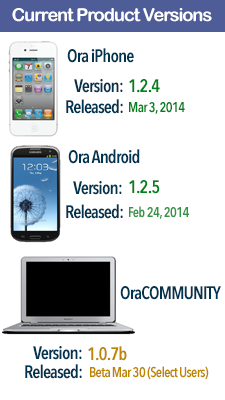
<style>
.page{position:relative;width:225px;height:400px;background:#ffffff}
.page>*{position:absolute;margin:0}
.t1{font:18px "ArialRoundedMTBold";letter-spacing:-0.05em;color:#ffffff}
.t2{font:18px "AvenirNextCondensed-DemiBold";letter-spacing:-0.05em;color:#003450}
.t3{font:18px "AvenirNextCondensed-DemiBold";letter-spacing:-0.05em;color:#00811b}
.t4{font:14px "AvenirNextCondensed-DemiBold";letter-spacing:-0.05em;color:#00811b}
.t5{font:14px "AvenirNextCondensed-DemiBold";letter-spacing:-0.05em;color:#349346}
.t6{font:18px "AvenirNextCondensed-DemiBold";letter-spacing:-0.05em;color:#bd8601}
.t7{font:14px "AvenirNextCondensed-DemiBold";letter-spacing:-0.05em;color:#bd8601}
</style>
<div class="page">
<p class="t1" style="left:12px;top:8px;width:200px;height:14px">Current Product Versions</p>
<p class="t2" style="left:67px;top:48px;width:67px;height:15px">Ora iPhone</p>
<p class="t2" style="left:74px;top:79px;width:49px;height:14px">Version:</p>
<p class="t3" style="left:129px;top:79px;width:31px;height:14px">1.2.4</p>
<p class="t2" style="left:66px;top:99px;width:57px;height:15px">Released:</p>
<p class="t4" style="left:129px;top:102px;width:56px;height:12px">Mar 3, 2014</p>
<p class="t2" style="left:68px;top:149px;width:72px;height:15px">Ora Android</p>
<p class="t2" style="left:73px;top:181px;width:49px;height:14px">Version:</p>
<p class="t3" style="left:129px;top:180px;width:31px;height:14px">1.2.5</p>
<p class="t2" style="left:66px;top:204px;width:57px;height:15px">Released:</p>
<p class="t5" style="left:129px;top:206px;width:60px;height:13px">Feb 24, 2014</p>
<p class="t2" style="left:120px;top:286px;width:101px;height:14px">OraCOMMUNITY</p>
<p class="t2" style="left:33px;top:346px;width:49px;height:14px">Version:</p>
<p class="t6" style="left:88px;top:346px;width:39px;height:15px">1.0.7b</p>
<p class="t2" style="left:25px;top:364px;width:57px;height:15px">Released:</p>
<p class="t7" style="left:90px;top:366px;width:119px;height:14px">Beta Mar 30 (Select Users)</p>
</div>
